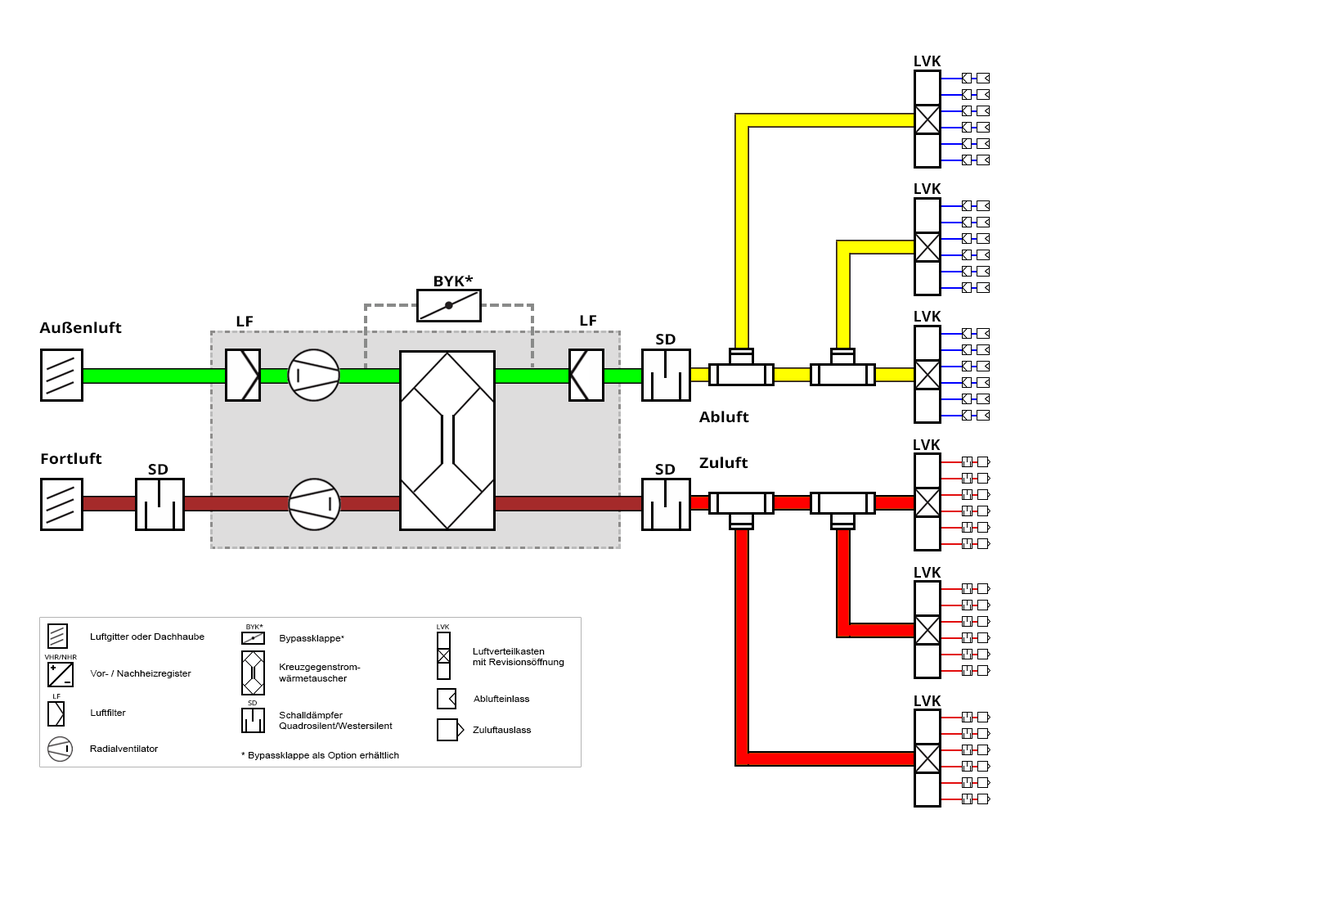
<style>
.page{position:relative;width:1325px;height:900px;background:#ffffff}
.page>*{position:absolute;margin:0}
.t1{font:14.7px "OpenSans-Bold";color:#000000}
.t2{font:14.7px "OpenSans-Bold";color:#000000;scale:1.1 1}
.t3{font:6.5px "OpenSans";scale:1.1 1}
.t4{font:9px "ArialMT";color:#000000;scale:1.1 1}
.t5{font:8.2px "ArialMT";color:#000000;scale:1.1 1}
.t6{font:6.5px "OpenSans";color:#000000;scale:1.1 1}
</style>
<div class="page">
<p class="t1" style="left:915px;top:56px;width:27px;height:10px">LVK</p>
<p class="t1" style="left:915px;top:183px;width:27px;height:11px">LVK</p>
<p class="t2" style="left:434px;top:275px;width:39px;height:11px">BYK*</p>
<p class="t2" style="left:236px;top:316px;width:17px;height:10px">LF</p>
<p class="t2" style="left:580px;top:315px;width:16px;height:11px">LF</p>
<p class="t1" style="left:915px;top:311px;width:27px;height:10px">LVK</p>
<p class="t2" style="left:39px;top:321px;width:83px;height:13px">Außenluft</p>
<p class="t2" style="left:656px;top:334px;width:20px;height:11px">SD</p>
<p class="t2" style="left:699px;top:411px;width:50px;height:12px">Abluft</p>
<p class="t1" style="left:914px;top:439px;width:27px;height:11px">LVK</p>
<p class="t2" style="left:41px;top:452px;width:61px;height:13px">Fortluft</p>
<p class="t2" style="left:699px;top:456px;width:49px;height:13px">Zuluft</p>
<p class="t2" style="left:148px;top:464px;width:21px;height:11px">SD</p>
<p class="t2" style="left:655px;top:464px;width:21px;height:11px">SD</p>
<p class="t1" style="left:915px;top:567px;width:27px;height:11px">LVK</p>
<p class="t3" style="left:246px;top:623px;width:17px;height:7px">BYK*</p>
<p class="t3" style="left:437px;top:624px;width:12px;height:6px">LVK</p>
<p class="t4" style="left:91px;top:633px;width:114px;height:8px">Luftgitter oder Dachhaube</p>
<p class="t4" style="left:280px;top:635px;width:64px;height:8px">Bypassklappe<span class="t5">*</span></p>
<p class="t4" style="left:473px;top:648px;width:91px;height:19px">Luftverteilkasten<br>mit Revisionsöffnung</p>
<p class="t6" style="left:44px;top:654px;width:33px;height:6px">VHR/NHR</p>
<p class="t4" style="left:279px;top:663px;width:82px;height:18px">Kreuzgegenstrom-<br>wärmetauscher</p>
<p class="t4" style="left:90px;top:670px;width:101px;height:8px">Vor- / Nachheizregister</p>
<p class="t3" style="left:53px;top:694px;width:8px;height:5px">LF</p>
<p class="t3" style="left:248px;top:700px;width:9px;height:6px">SD</p>
<p class="t4" style="left:474px;top:695px;width:56px;height:7px">Ablufteinlass</p>
<p class="t1" style="left:915px;top:695px;width:27px;height:11px">LVK</p>
<p class="t4" style="left:91px;top:709px;width:35px;height:7px">Luftfilter</p>
<p class="t4" style="left:279px;top:712px;width:114px;height:18px">Schalldämpfer<br>Quadrosilent/Westersilent</p>
<p class="t4" style="left:473px;top:726px;width:59px;height:7px">Zuluftauslass</p>
<p class="t4" style="left:90px;top:745px;width:69px;height:7px">Radialventilator</p>
<p class="t4" style="left:241px;top:752px;width:158px;height:8px">* Bypassklappe als Option erhältlich</p>
</div>
